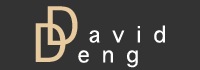
<style>
.page{position:relative;width:200px;height:70px;background:#333333}
.page>*{position:absolute;margin:0}
.t1{font:72px "AppleSymbols";color:#e7ca9e}
.t2{font:30px "AppleSymbols";letter-spacing:0.4em;color:#ffffff}
</style>
<div class="page">
<p class="t1" style="left:47px;top:6px;width:31px;height:39px">D</p>
<p class="t1" style="left:35px;top:23px;width:31px;height:39px">D</p>
<p class="t2" style="left:89px;top:25px;width:76px;height:18px">avid</p>
<p class="t2" style="left:78px;top:50px;width:60px;height:18px">eng</p>
</div>
